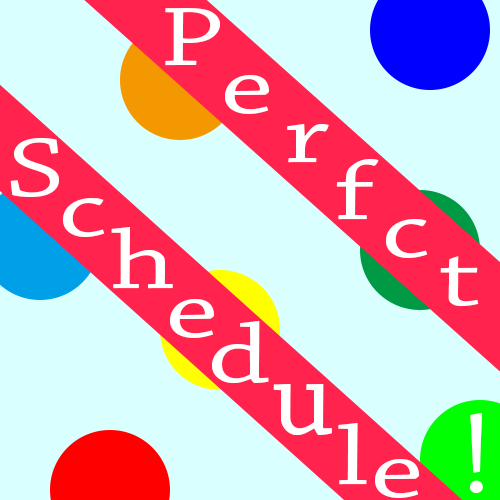
<style>
.page{position:relative;width:500px;height:500px;background:#daffff}
.page>*{position:absolute;margin:0}
.t1{font:87.6px "ChaparralPro-Regular";color:#ffffff;scale:1.37 1}
.t2{font:120px "ChaparralPro-Regular";color:#ffffff}
</style>
<div class="page">
<p class="t1" style="left:165px;top:8px;width:55px;height:58px">P</p>
<p class="t1" style="left:225px;top:75px;width:44px;height:39px">e</p>
<p class="t1" style="left:287px;top:124px;width:42px;height:39px">r</p>
<p class="t1" style="left:10px;top:137px;width:49px;height:60px">S</p>
<p class="t1" style="left:336px;top:159px;width:43px;height:61px">f</p>
<p class="t1" style="left:63px;top:198px;width:42px;height:39px">c</p>
<p class="t1" style="left:386px;top:219px;width:42px;height:39px">c</p>
<p class="t1" style="left:111px;top:227px;width:62px;height:62px">h</p>
<p class="t1" style="left:440px;top:256px;width:39px;height:51px">t</p>
<p class="t1" style="left:170px;top:299px;width:44px;height:39px">e</p>
<p class="t1" style="left:212px;top:321px;width:57px;height:63px">d</p>
<p class="t2" style="left:273px;top:384px;width:59px;height:51px">u</p>
<p class="t2" style="left:470px;top:413px;width:13px;height:80px">!</p>
<p class="t1" style="left:338px;top:423px;width:29px;height:62px">l</p>
<p class="t1" style="left:375px;top:459px;width:44px;height:39px">e</p>
</div>
